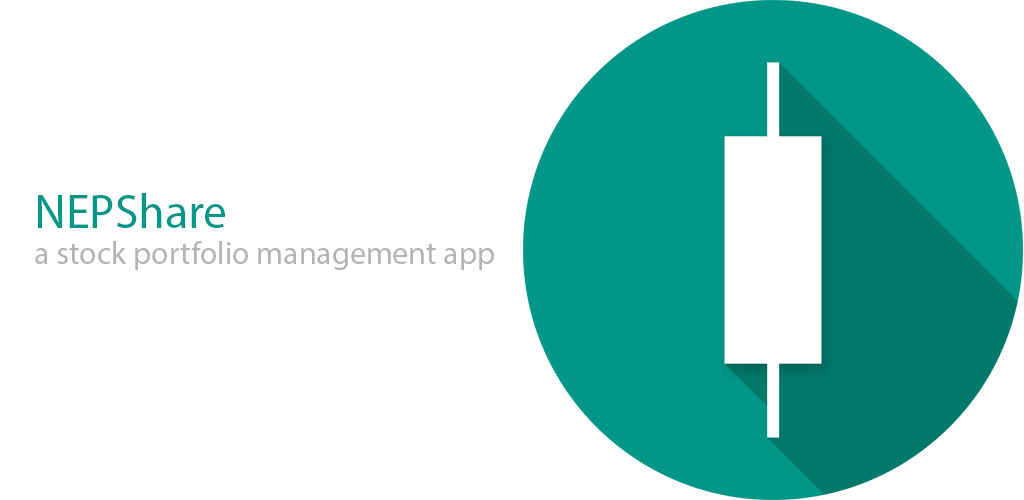
<style>
.page{position:relative;width:1024px;height:500px;background:#ffffff}
.page>*{position:absolute;margin:0}
.t1{font:48px "MyriadPro-Regular";color:#009688}
.t2{font:32px "MyriadPro-Regular";color:#b2b3b3}
</style>
<div class="page">
<p class="t1" style="left:38px;top:193px;width:187px;height:35px">NEPShare</p>
<p class="t2" style="left:35px;top:241px;width:459px;height:29px">a stock portfolio management app</p>
</div>
